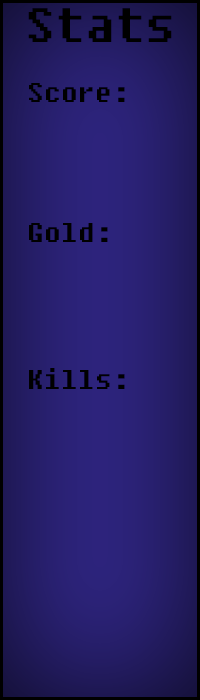
<style>
.page{position:relative;width:200px;height:700px}
.page>*{position:absolute;margin:0}
.t1{font:48px "Fixedsys";color:#000000}
.t2{font:27px "Fixedsys";color:#000000}
</style>
<div class="page">
<p class="t1" style="left:28px;top:8px;width:144px;height:34px">Stats</p>
<p class="t2" style="left:29px;top:83px;width:96px;height:19px">Score:</p>
<p class="t2" style="left:29px;top:223px;width:79px;height:19px">Gold:</p>
<p class="t2" style="left:29px;top:368px;width:96px;height:21px">Kills:</p>
</div>
